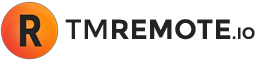
<style>
.page{position:relative;width:255px;height:60px;background:#ffffff}
.page>*{position:absolute;margin:0}
.t1{font:27.8px "Montserrat-Bold";color:#232323;text-transform:uppercase}
.t2{font:27.8px "Montserrat-Regular";color:#232323;text-transform:uppercase}
.t3{font:16.5px "Montserrat-Bold";color:#232323;text-transform:uppercase}
</style>
<div class="page">
<p class="t1" style="left:65px;top:19px;width:190px;height:21px"><span class="t2">tm</span>remote<span class="t3">.io</span></p>
</div>
